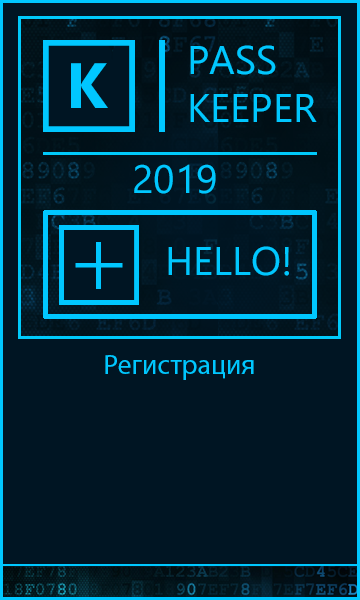
<style>
.page{position:relative;width:360px;height:600px;background:#001523}
.page>*{position:absolute;margin:0}
.t1{font:39.9px "NirmalaUI";color:#00c7ff}
.t2{font:63.9px "NirmalaUI-Bold";color:#00c7ff}
.t3{font:27.8px "MyriadPro-Regular";color:#00c7ff}
</style>
<div class="page">
<p class="t1" style="left:190px;top:45px;width:127px;height:77px">PASS<br>KEEPER</p>
<p class="t2" style="left:71px;top:63px;width:37px;height:45px">K</p>
<p class="t1" style="left:134px;top:164px;width:82px;height:30px">2019</p>
<p class="t1" style="left:168px;top:246px;width:121px;height:30px">HELLO!</p>
<p class="t3" style="left:105px;top:355px;width:149px;height:25px">Регистрация</p>
</div>
